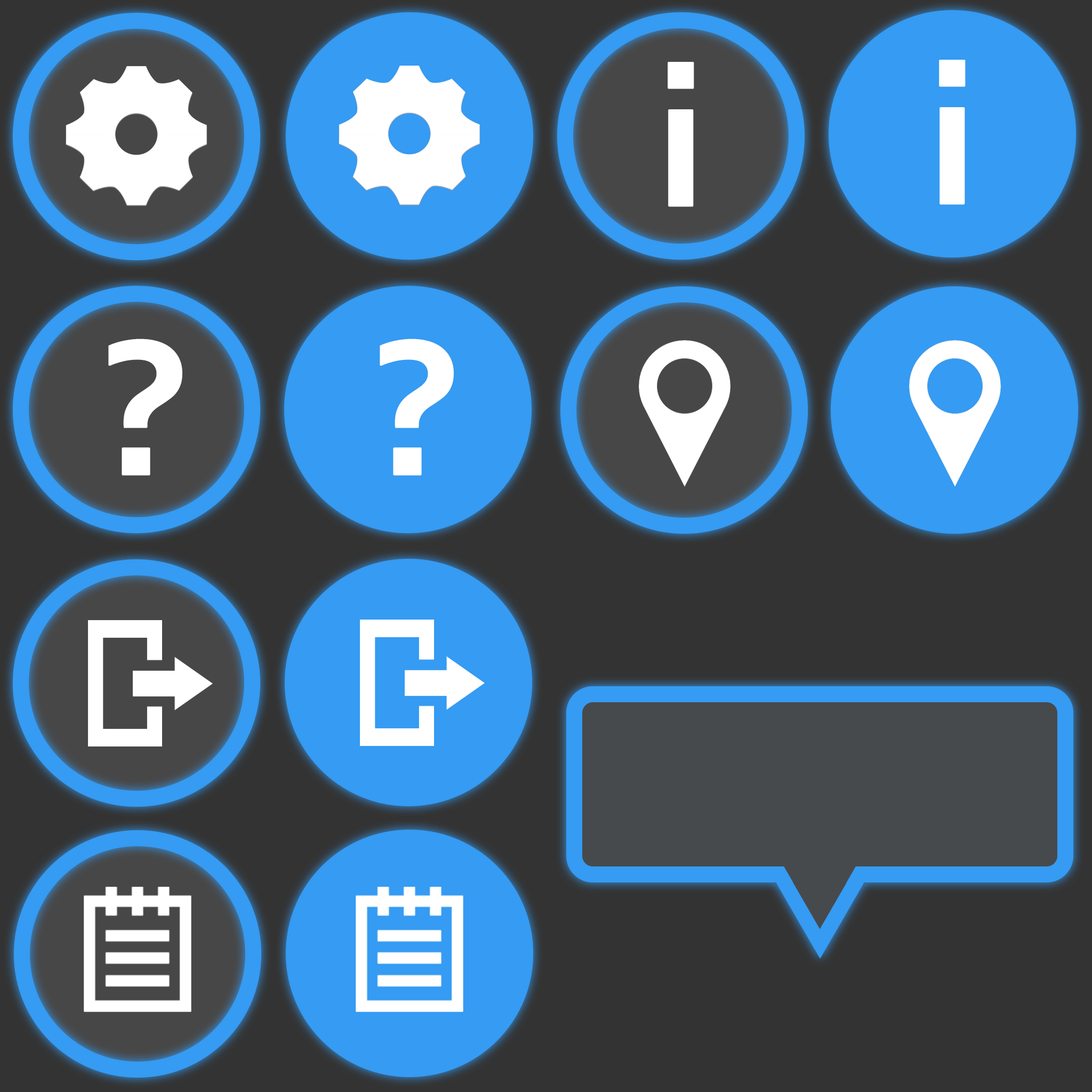
<style>
.page{position:relative;width:1092px;height:1092px;background:#333333}
.page>*{position:absolute;margin:0}
.t1{font:202.6px "Corbel-Bold";color:#ffffff;font-weight:bold}
</style>
<div class="page">
<p class="t1" style="left:668px;top:62px;width:26px;height:145px">i</p>
<p class="t1" style="left:939px;top:60px;width:27px;height:145px">i</p>
<p class="t1" style="left:108px;top:339px;width:74px;height:137px">?</p>
<p class="t1" style="left:380px;top:339px;width:74px;height:137px">?</p>
</div>
